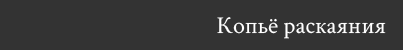
<style>
.page{position:relative;width:403px;height:50px;background:#333333}
.page>*{position:absolute;margin:0}
.t1{font:24px "CrimsonText-Regular";color:#ffffff}
</style>
<div class="page">
<p class="t1" style="left:217px;top:17px;width:169px;height:22px">Копьё раскаяния</p>
</div>
